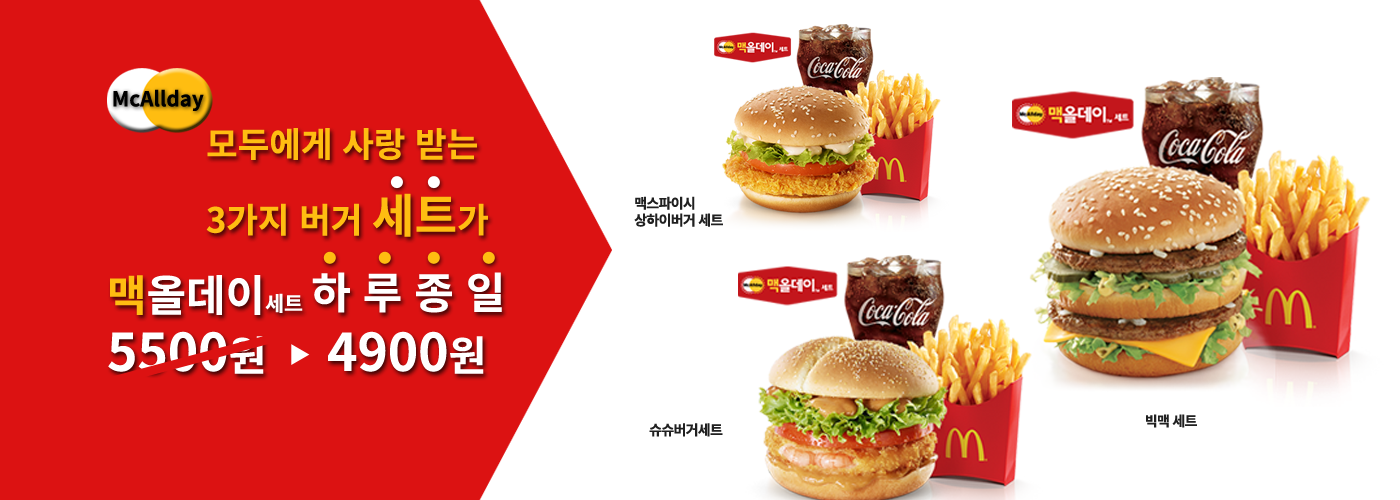
<style>
.page{position:relative;width:1400px;height:500px;background:#ffffff}
.page>*{position:absolute;margin:0}
.t1{font:20.6px "NotoSansKR-Bold";color:#000000}
.t2{font:34.4px/75.6px "NotoSansKR-Bold";color:#ffbd11}
.t3{font:46.4px/75.6px "NotoSansKR-Bold";color:#ffbd11}
.t4{font:14px "NotoSansKR-Bold";letter-spacing:-0.05em;color:#202020}
.t5{font:43px "NotoSansKR-Bold";color:#ffffff}
.t6{font:43px "NotoSansKR-Bold";color:#ffbd11}
.t7{font:20.6px "NotoSansKR-Bold";color:#ffffff}
.t8{font:51.6px "NotoSansKR-Bold";color:#ffffff}
.t9{font:41.3px "NotoSansKR-Bold";color:#ffffff}
</style>
<div class="page">
<p class="t1" style="left:113px;top:89px;width:91px;height:22px">McAllday</p>
<p class="t2" style="left:206px;top:128px;width:282px;height:109px">모두에게 사랑 받는 <br>3가지 버거 <span class="t3">세트</span>가</p>
<p class="t4" style="left:634px;top:196px;width:89px;height:31px">맥스파이시<br>상하이버거 세트</p>
<p class="t5" style="left:110px;top:275px;width:193px;height:40px"><span class="t6">맥</span>올데이<span class="t7">세트</span></p>
<p class="t5" style="left:312px;top:272px;width:190px;height:41px">하 루 종 일</p>
<p class="t8" style="left:108px;top:331px;width:156px;height:43px">5500<span class="t9">원</span></p>
<p class="t8" style="left:328px;top:331px;width:156px;height:43px">4900<span class="t9">원</span></p>
<p class="t4" style="left:1146px;top:414px;width:51px;height:14px">빅맥 세트</p>
<p class="t4" style="left:649px;top:423px;width:74px;height:14px">슈슈버거세트</p>
</div>
